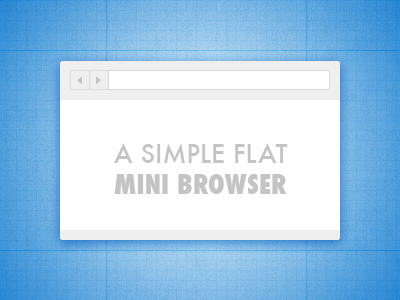
<style>
.page{position:relative;width:400px;height:300px;background:#ffffff}
.page>*{position:absolute;margin:0}
.t1{font:25px "Futura-Medium";color:#c4c4c4;text-transform:uppercase}
.t2{font:26px "Futura-CondensedExtraBold";color:#c4c4c4;text-transform:uppercase}
</style>
<div class="page">
<p class="t1" style="left:114px;top:143px;width:174px;height:51px">A Simple Flat <br><span class="t2">Mini Browser</span></p>
</div>
